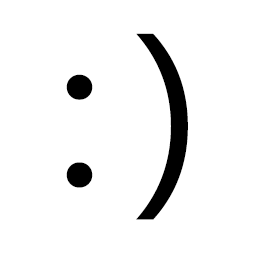
<style>
.page{position:relative;width:256px;height:256px;background:#ffffff}
.page>*{position:absolute;margin:0}
.t1{font:200px "MicrosoftYaHei";letter-spacing:0.075em;color:#000000}
</style>
<div class="page">
<p class="t1" style="left:66px;top:33px;width:122px;height:187px">:）</p>
</div>
